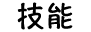
<style>
.page{position:relative;width:91px;height:32px;background:#ffffff}
.page>*{position:absolute;margin:0}
.t1{font:28px "HannotateSC-W7";letter-spacing:0.055em;color:#000000}
</style>
<div class="page">
<p class="t1" style="left:17px;top:2px;width:56px;height:28px">技能</p>
</div>
